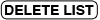
<style>
.page{position:relative;width:100px;height:20px;background:#ffffff}
.page>*{position:absolute;margin:0}
.t1{font:14px "Helvetica-Bold";color:#000000}
</style>
<div class="page">
<p class="t1" style="left:5px;top:5px;width:89px;height:10px">DELETE LIST</p>
</div>
